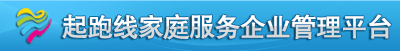
<style>
.page{position:relative;width:400px;height:51px}
.page>*{position:absolute;margin:0}
.t1{font:26px "FZHTJW--GB1-0";letter-spacing:-0.05em;font-weight:bold}
</style>
<div class="page">
<p class="t1" style="left:62px;top:14px;width:329px;height:26px">起跑线家庭服务企业管理平台</p>
</div>
